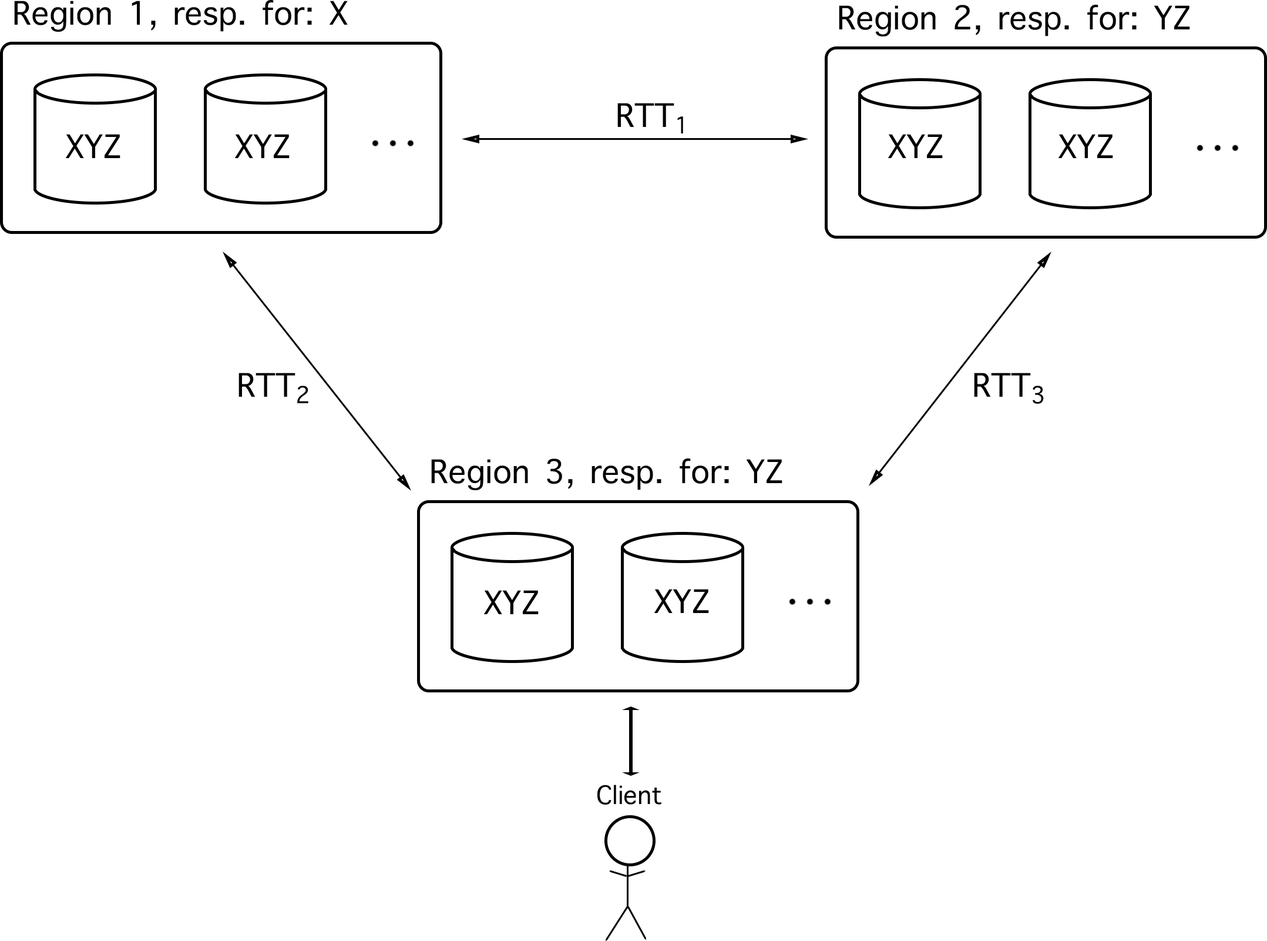
<style>
.page{position:relative;width:1267px;height:941px;background:#ffffff}
.page>*{position:absolute;margin:0}
.t1{font:44.1px "AppleSymbols";color:#000000}
.t2{font:34.3px "AppleSymbols";color:#000000}
</style>
<div class="page">
<p class="t1" style="left:14px;top:0px;width:334px;height:32px">Region 1, resp. for: X</p>
<p class="t1" style="left:839px;top:5px;width:352px;height:31px">Region 2, resp. for: YZ</p>
<p class="t1" style="left:618px;top:103px;width:65px;height:30px">RTT₁</p>
<p class="t1" style="left:66px;top:134px;width:54px;height:24px">XYZ</p>
<p class="t1" style="left:235px;top:134px;width:55px;height:24px">XYZ</p>
<p class="t1" style="left:888px;top:134px;width:55px;height:24px">XYZ</p>
<p class="t1" style="left:1059px;top:134px;width:55px;height:24px">XYZ</p>
<p class="t1" style="left:239px;top:373px;width:70px;height:30px">RTT₂</p>
<p class="t1" style="left:974px;top:373px;width:70px;height:31px">RTT₃</p>
<p class="t1" style="left:431px;top:458px;width:352px;height:32px">Region 3, resp. for: YZ</p>
<p class="t1" style="left:484px;top:590px;width:55px;height:24px">XYZ</p>
<p class="t1" style="left:655px;top:589px;width:54px;height:24px">XYZ</p>
<p class="t2" style="left:598px;top:784px;width:64px;height:20px">Client</p>
</div>
